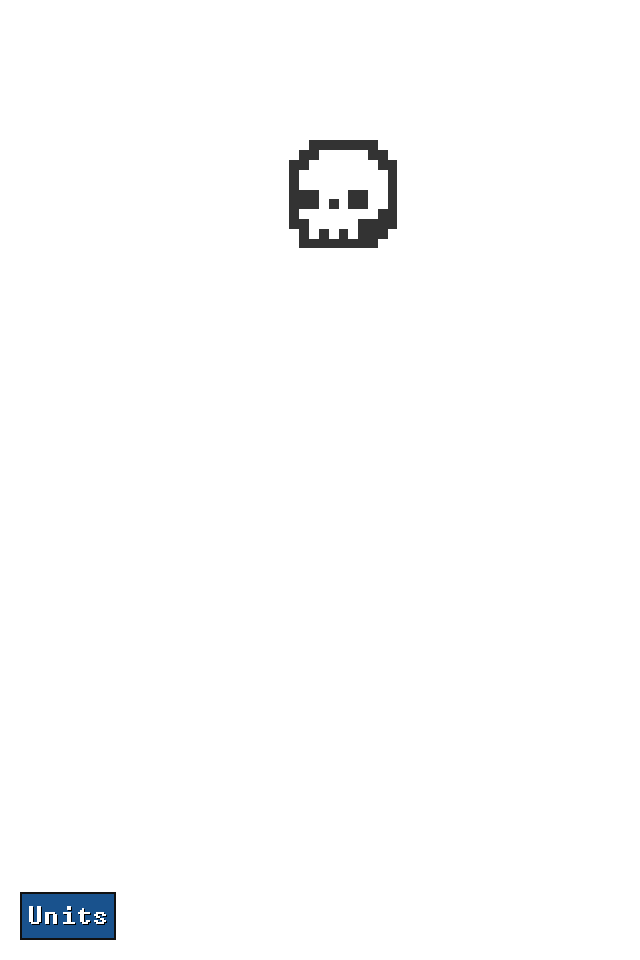
<style>
.page{position:relative;width:640px;height:960px;background:#ffffff}
.page>*{position:absolute;margin:0}
.t1{font:24px "Terminal";letter-spacing:0.01em;color:#ffffff}
.t2{font:24px "Terminal";letter-spacing:0.01em}
</style>
<div class="page">
<p class="t1" style="left:29px;top:906px;width:77px;height:18px">Units</p>
<p class="t2" style="left:30px;top:907px;width:77px;height:18px">Units</p>
</div>
